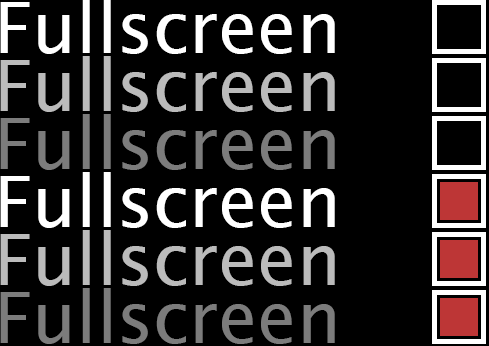
<style>
.page{position:relative;width:489px;height:346px;background:#000000}
.page>*{position:absolute;margin:0}
.t1{font:70.7px "LucidaSans";color:#ffffff}
.t2{font:70.7px "LucidaSans";color:#bbbbbb}
.t3{font:70.7px "LucidaSans";color:#7c7c7c}
</style>
<div class="page">
<p class="t1" style="left:0px;top:0px;width:335px;height:54px">Fullscreen</p>
<p class="t2" style="left:0px;top:56px;width:335px;height:56px">Fullscreen</p>
<p class="t3" style="left:0px;top:114px;width:335px;height:56px">Fullscreen</p>
<p class="t1" style="left:0px;top:172px;width:335px;height:56px">Fullscreen</p>
<p class="t2" style="left:0px;top:230px;width:335px;height:56px">Fullscreen</p>
<p class="t3" style="left:0px;top:288px;width:335px;height:56px">Fullscreen</p>
</div>
